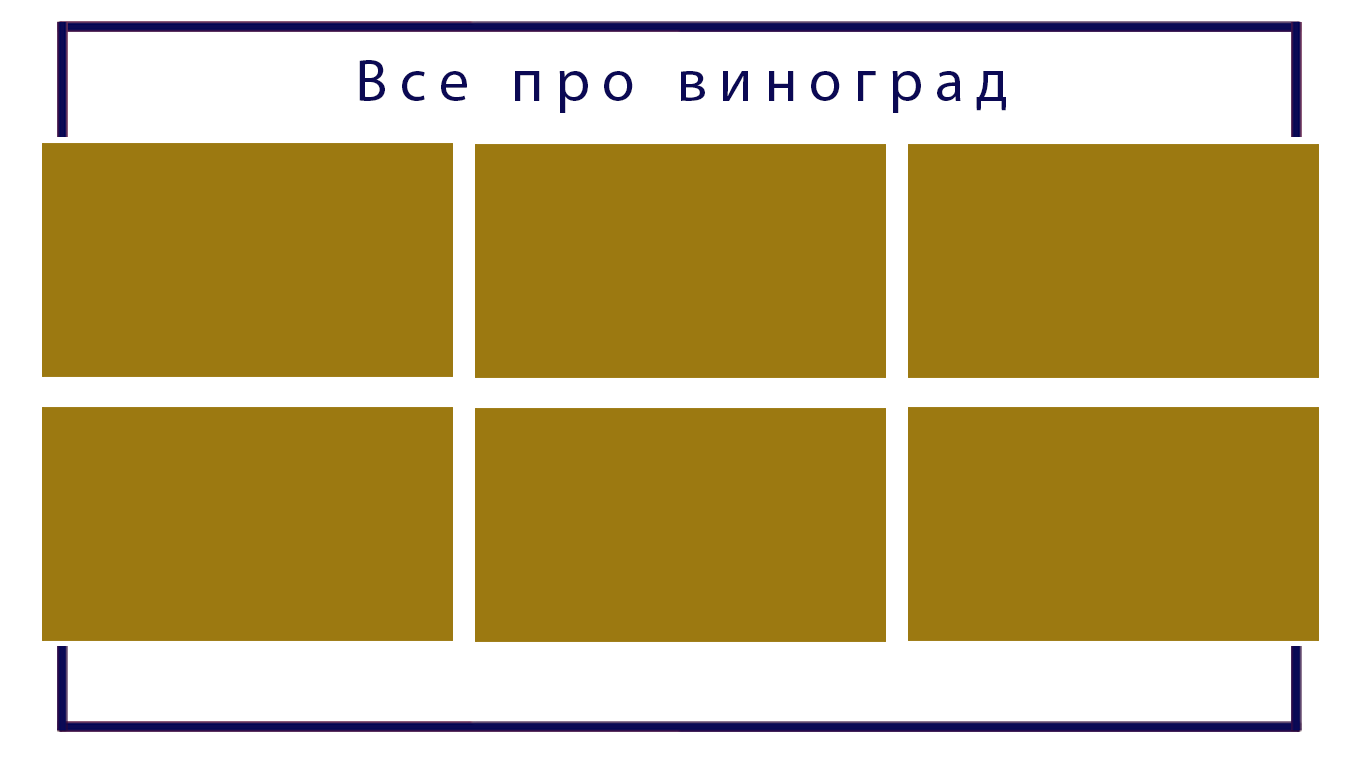
<style>
.page{position:relative;width:1366px;height:768px;background:#9c7911}
.page>*{position:absolute;margin:0}
.t1{font:60px "MyriadPro-Regular";letter-spacing:0.2em;color:#0b0954}
</style>
<div class="page">
<p class="t1" style="left:359px;top:60px;width:647px;height:53px">Все про виноград</p>
</div>
